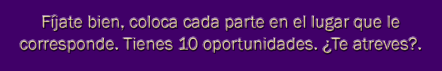
<style>
.page{position:relative;width:442px;height:71px;background:#400068}
.page>*{position:absolute;margin:0}
.t1{font:18px/22.2px "FranklinGothic-Book";color:#d4c088}
</style>
<div class="page">
<p class="t1" style="left:20px;top:15px;width:401px;height:39px;text-align:center">Fíjate bien, coloca cada parte en el lugar que le<br>corresponde. Tienes 10 oportunidades. ¿Te atreves?.</p>
</div>
